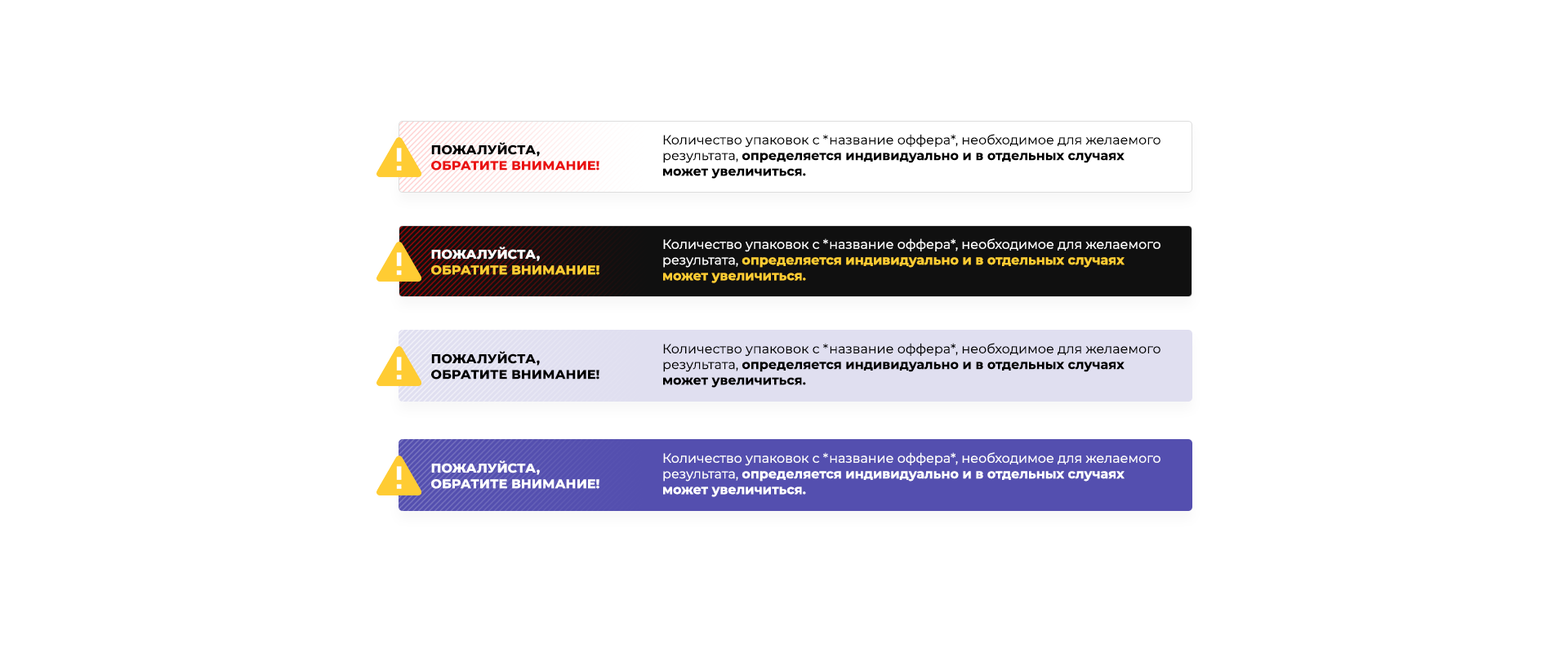
<style>
.page{position:relative;width:1568px;height:653px;background:#ffffff}
.page>*{position:absolute;margin:0}
.t1{font:13.1px "Montserrat-Regular";color:#000000}
.t2{font:13.1px "Montserrat-Bold";color:#000000}
.t3{font:13.1px "Montserrat-ExtraBold";color:#ea1111}
.t4{font:13.1px "Montserrat-ExtraBold";color:#000000}
.t5{font:13.1px "Montserrat-Regular";color:#ffffff}
.t6{font:13.1px "Montserrat-Bold";color:#ffcc33}
.t7{font:13.1px "Montserrat-ExtraBold";color:#ffcc33}
.t8{font:13.1px "Montserrat-ExtraBold";color:#ffffff}
.t9{font:13.1px "Montserrat-Bold";color:#ffffff}
</style>
<div class="page">
<p class="t1" style="left:663px;top:134px;width:497px;height:45px">Количество упаковок с *название оффера*, необходимое для желаемого результата, <span class="t2">определяется индивидуально и в отдельных случаях может увеличиться.</span></p>
<p class="t3" style="left:431px;top:142px;width:168px;height:29px"><span class="t4">ПОЖАЛУЙСТА,<br></span>ОБРАТИТЕ ВНИМАНИЕ!</p>
<p class="t5" style="left:663px;top:238px;width:497px;height:45px">Количество упаковок с *название оффера*, необходимое для желаемого результата, <span class="t6">определяется индивидуально и в отдельных случаях может увеличиться.</span></p>
<p class="t7" style="left:431px;top:247px;width:168px;height:28px"><span class="t8">ПОЖАЛУЙСТА,<br></span>ОБРАТИТЕ ВНИМАНИЕ!</p>
<p class="t4" style="left:431px;top:351px;width:168px;height:29px">ПОЖАЛУЙСТА,<br>ОБРАТИТЕ ВНИМАНИЕ!</p>
<p class="t1" style="left:663px;top:343px;width:497px;height:45px">Количество упаковок с *название оффера*, необходимое для желаемого результата, <span class="t2">определяется индивидуально и в отдельных случаях может увеличиться.</span></p>
<p class="t8" style="left:431px;top:461px;width:168px;height:28px">ПОЖАЛУЙСТА,<br>ОБРАТИТЕ ВНИМАНИЕ!</p>
<p class="t5" style="left:663px;top:452px;width:497px;height:45px">Количество упаковок с *название оффера*, необходимое для желаемого результата, <span class="t9">определяется индивидуально и в отдельных случаях может увеличиться.</span></p>
</div>
